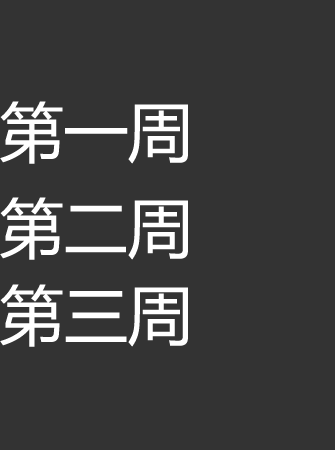
<style>
.page{position:relative;width:335px;height:450px;background:#333333}
.page>*{position:absolute;margin:0}
.t1{font:64px "MicrosoftYaHei";color:#ffffff}
</style>
<div class="page">
<p class="t1" style="left:0px;top:101px;width:188px;height:63px">第一周</p>
<p class="t1" style="left:0px;top:197px;width:188px;height:63px">第二周</p>
<p class="t1" style="left:0px;top:284px;width:188px;height:63px">第三周</p>
</div>
